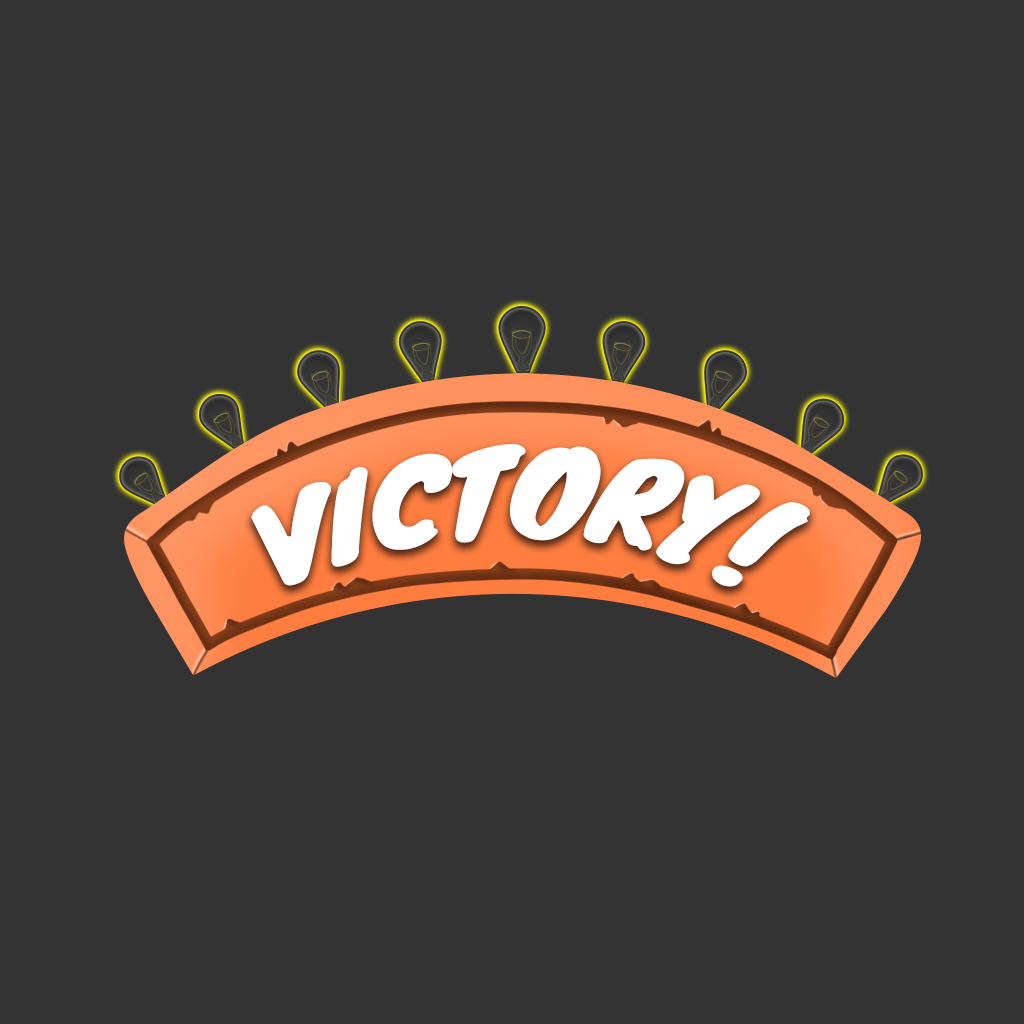
<style>
.page{position:relative;width:1024px;height:1024px;background:#333333}
.page>*{position:absolute;margin:0}
.t1{font:110.2px "Knewave-Regular";color:#ffffff}
</style>
<div class="page">
<p class="t1" style="left:251px;top:443px;width:559px;height:144px">VICTORY!</p>
</div>
